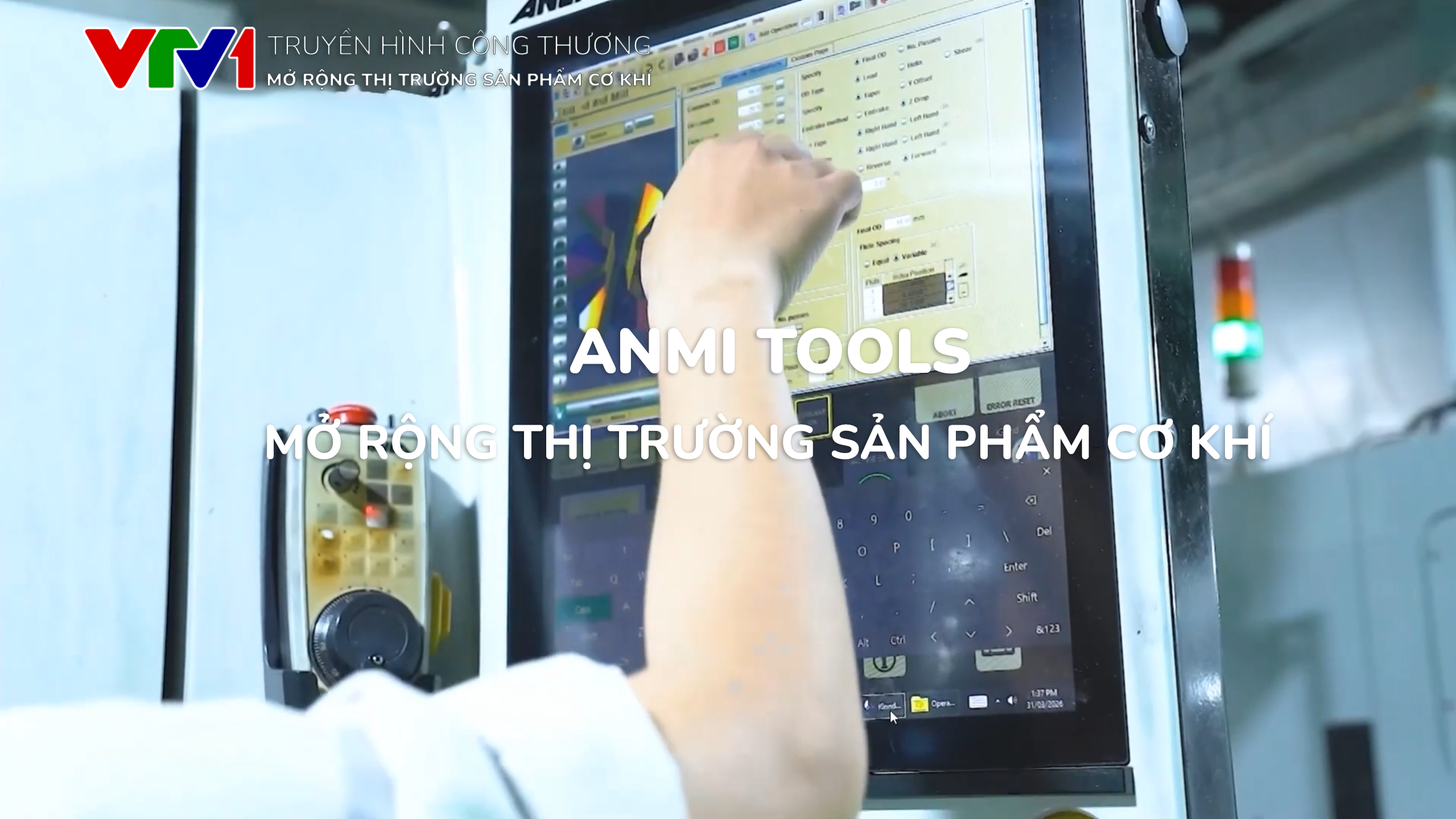
<style>
.page{position:relative;width:1456px;height:819px}
.page>*{position:absolute;margin:0}
.t1{font:26.6px "Nunito-Regular";text-transform:uppercase}
.t2{font:18px "Nunito-Black";text-transform:uppercase}
.t3{font:62.6px "Nunito-Black";color:#ffffff;text-transform:uppercase}
.t4{font:47.8px "Nunito-ExtraBold";color:#ffffff;text-transform:uppercase}
</style>
<div class="page">
<p class="t1" style="left:267px;top:27px;width:383px;height:28px">Truyền hình công thương</p>
<p class="t2" style="left:267px;top:67px;width:386px;height:23px">Mở rộng thị trường sản phẩm cơ khí</p>
<p class="t3" style="left:570px;top:328px;width:400px;height:46px">anmi tools</p>
<p class="t4" style="left:267px;top:409px;width:1007px;height:60px">Mở rộng thị trường sản phẩm cơ khí</p>
</div>
